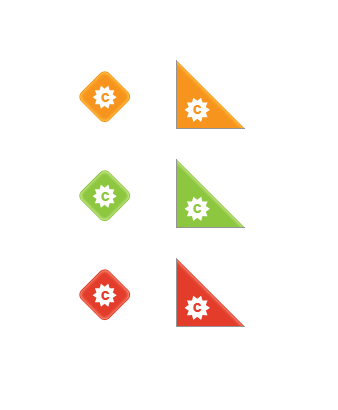
<style>
.page{position:relative;width:338px;height:410px;background:#ffffff}
.page>*{position:absolute;margin:0}
.t1{font:15.9px "Arial-BoldMT";color:#f7941d}
.t2{font:15.9px "Arial-BoldMT";color:#8dc63f}
.t3{font:15.9px "Arial-BoldMT";color:#e33c2b}
</style>
<div class="page">
<p class="t1" style="left:101px;top:93px;width:9px;height:9px">c</p>
<p class="t1" style="left:193px;top:105px;width:9px;height:9px">c</p>
<p class="t2" style="left:101px;top:192px;width:9px;height:9px">c</p>
<p class="t2" style="left:193px;top:204px;width:9px;height:9px">c</p>
<p class="t3" style="left:101px;top:291px;width:9px;height:9px">c</p>
<p class="t3" style="left:193px;top:303px;width:9px;height:9px">c</p>
</div>
